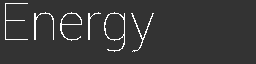
<style>
.page{position:relative;width:256px;height:64px;background:#333333}
.page>*{position:absolute;margin:0}
.t1{font:52px "Roboto-Thin";color:#ffffff}
</style>
<div class="page">
<p class="t1" style="left:5px;top:3px;width:149px;height:49px">Energy</p>
</div>
